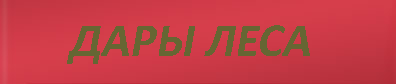
<style>
.page{position:relative;width:396px;height:84px}
.page>*{position:absolute;margin:0}
.t1{font:48px "Calibri-Bold";color:#666633;font-style:italic}
</style>
<div class="page">
<p class="t1" style="left:67px;top:25px;width:243px;height:39px">ДАРЫ ЛЕСА</p>
</div>
